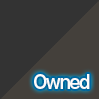
<style>
.page{position:relative;width:99px;height:99px;background:#333333}
.page>*{position:absolute;margin:0}
.t1{font:18px "GothicMB101Pro-DeBold";letter-spacing:-0.08em;color:#fdfbf9;scale:0.9 1}
</style>
<div class="page">
<p class="t1" style="left:34px;top:74px;width:56px;height:15px">Owned</p>
</div>
